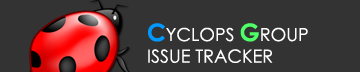
<style>
.page{position:relative;width:360px;height:72px;background:#333333}
.page>*{position:absolute;margin:0}
.t1{font:18px "CenturyGothic";color:#ffffff}
.t2{font:24px "CenturyGothic-Bold";color:#0099ff}
.t3{font:24px "CenturyGothic-Bold";color:#4fff67}
</style>
<div class="page">
<p class="t1" style="left:148px;top:23px;width:160px;height:40px"><span class="t2">C</span>YCLOPS <span class="t3">G</span>ROUP<br>ISSUE TRACKER</p>
</div>
